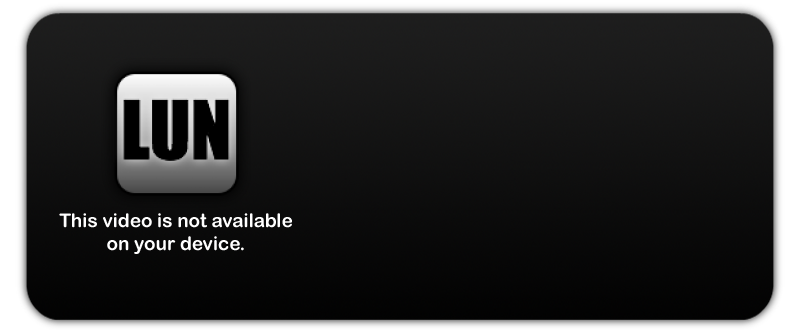
<style>
.page{position:relative;width:800px;height:330px}
.page>*{position:absolute;margin:0}
.t1{font:18.9px "ArialRoundedMTBold";color:#ffffff}
</style>
<div class="page">
<p class="t1" style="left:59px;top:213px;width:233px;height:41px;text-align:center">This video is not available<br>on your device.</p>
</div>
